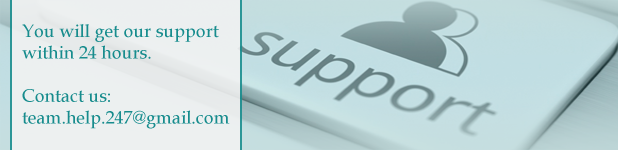
<style>
.page{position:relative;width:618px;height:150px}
.page>*{position:absolute;margin:0}
.t1{font:18px "BookAntiqua";color:#178c8d}
</style>
<div class="page">
<p class="t1" style="left:22px;top:24px;width:208px;height:105px">You will get our support<br>within 24 hours.<br><br>Contact us:<br>team.help.247@gmail.com</p>
</div>
